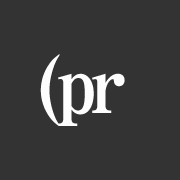
<style>
.page{position:relative;width:180px;height:180px;background:#333333}
.page>*{position:absolute;margin:0}
.t1{font:80px "RyuminPro-ExBold";letter-spacing:-0.08em;color:#fdfdfd;scale:0.9 1}
</style>
<div class="page">
<p class="t1" style="left:40px;top:54px;width:85px;height:72px">(pr</p>
</div>
